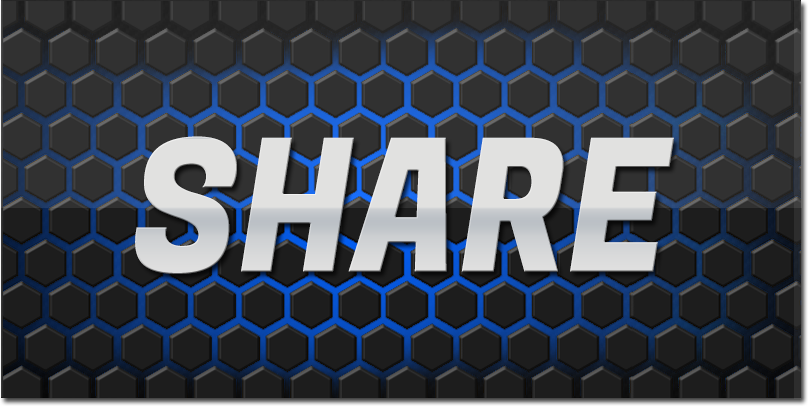
<style>
.page{position:relative;width:808px;height:406px;background:#313131}
.page>*{position:absolute;margin:0}
.t1{font:185.2px "FugazOne-Regular";color:#dfdfdf;scale:0.89 1}
</style>
<div class="page">
<p class="t1" style="left:135px;top:136px;width:539px;height:138px">SHARE</p>
</div>
